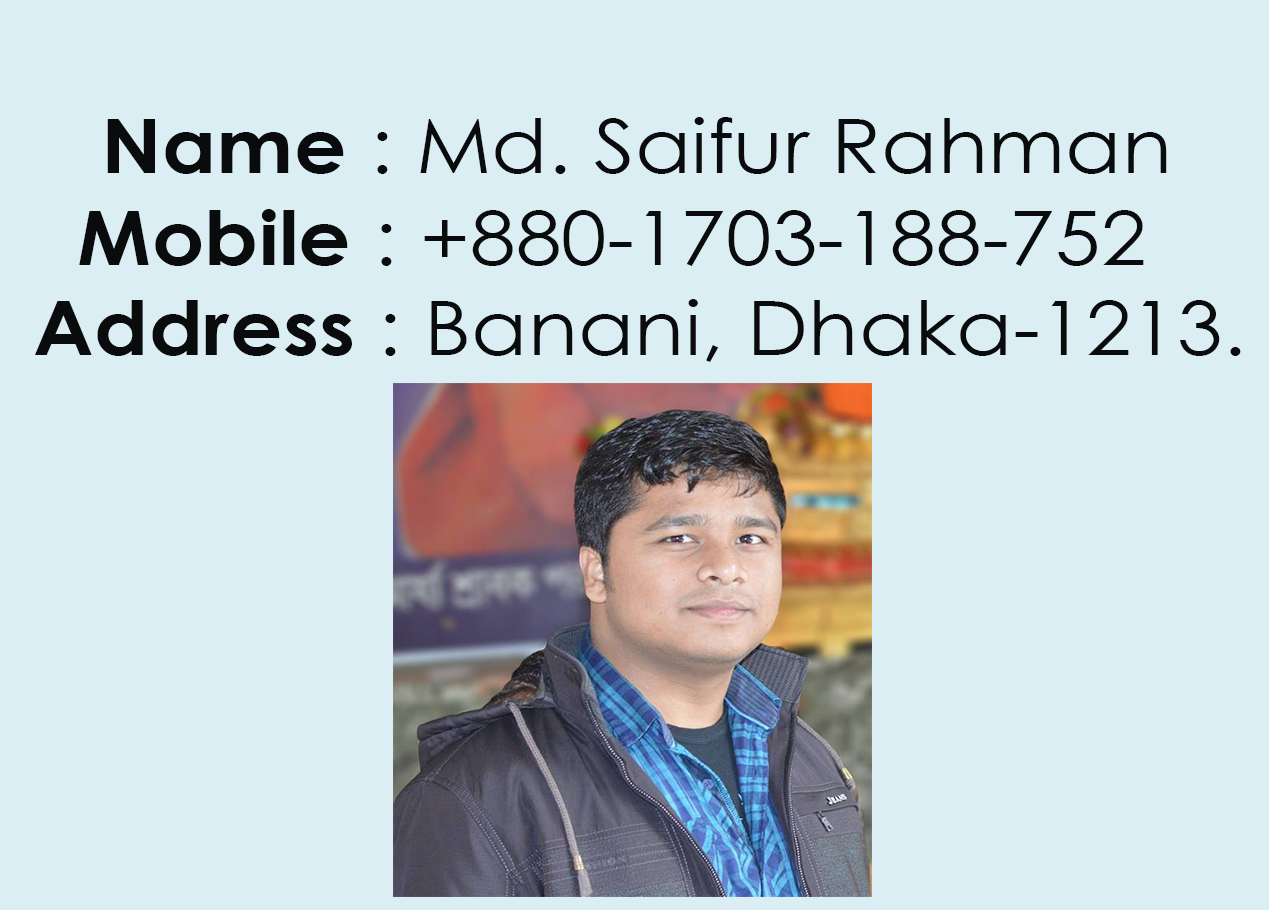
<style>
.page{position:relative;width:1269px;height:910px;background:#dbeef4}
.page>*{position:absolute;margin:0}
.t1{font:75px "CenturyGothic";color:#0a0b0d;scale:1.1 1}
.t2{font:75px "CenturyGothic-Bold";color:#0a0b0d;scale:1.1 1}
</style>
<div class="page">
<p class="t1" style="left:107px;top:117px;width:1060px;height:57px"><span class="t2">Name </span>: Md. Saifur Rahman</p>
<p class="t1" style="left:107px;top:117px;width:1060px;height:57px"><span class="t2">Name </span>: Md. Saifur Rahman</p>
<p class="t1" style="left:79px;top:209px;width:1065px;height:57px"><span class="t2">Mobile </span>: +880-1703-188-752</p>
<p class="t1" style="left:79px;top:209px;width:1065px;height:57px"><span class="t2">Mobile </span>: +880-1703-188-752</p>
<p class="t1" style="left:35px;top:299px;width:1206px;height:63px"><span class="t2">Address </span>: Banani, Dhaka-1213.</p>
<p class="t1" style="left:35px;top:299px;width:1206px;height:63px"><span class="t2">Address </span>: Banani, Dhaka-1213.</p>
</div>
